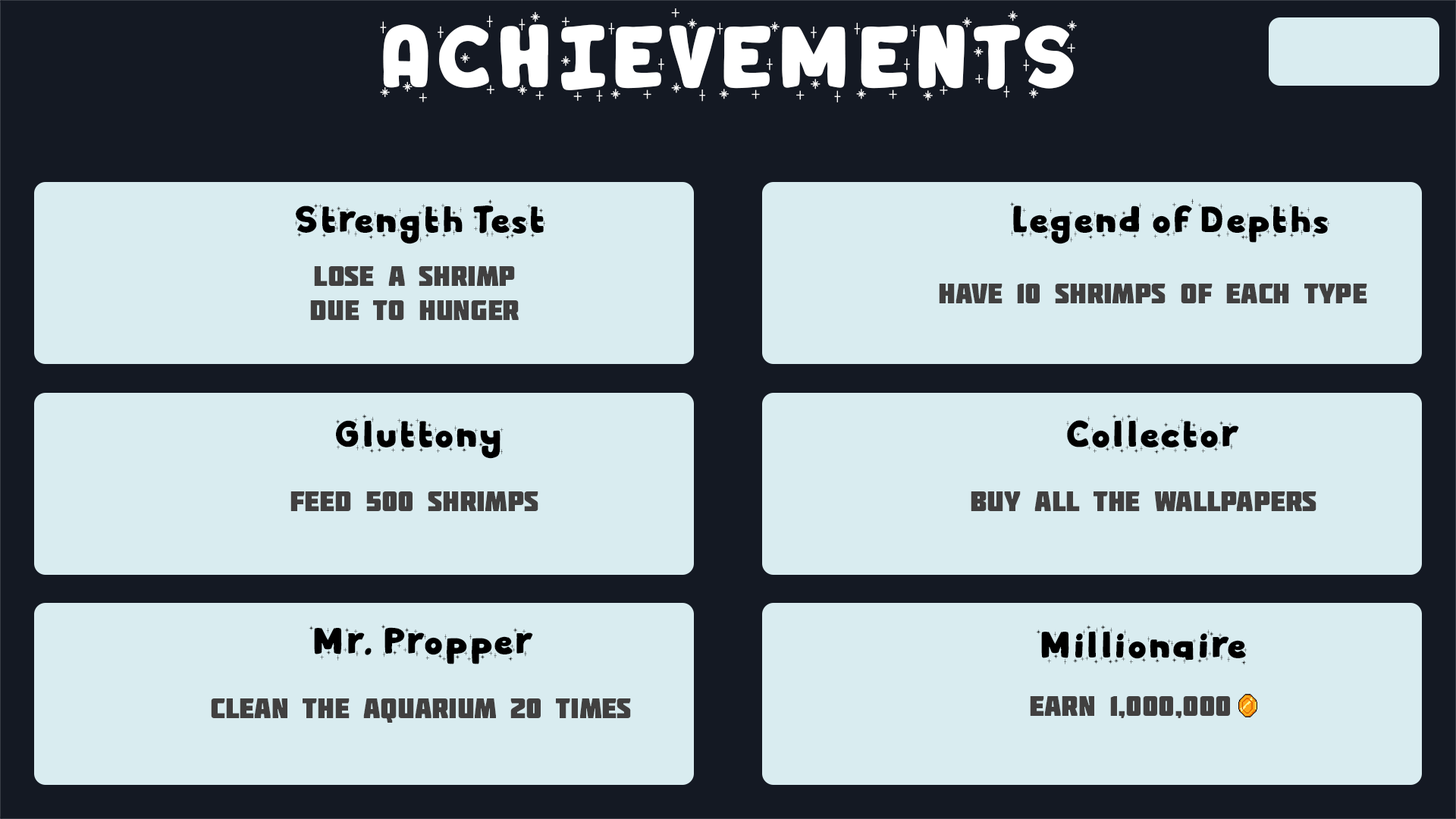
<style>
.page{position:relative;width:1456px;height:819px;background:#d9ecf0}
.page>*{position:absolute;margin:0}
.t1{font:79.6px "WinterDairy-Shiny";color:#ffffff}
.t2{font:34.1px "WinterDairy-Shiny";color:#000000}
.t3{font:28.4px "Molot";color:#414040}
</style>
<div class="page">
<p class="t1" style="left:380px;top:8px;width:697px;height:94px">ACHIEVEMENTS</p>
<p class="t2" style="left:295px;top:199px;width:251px;height:45px">Strength Test</p>
<p class="t2" style="left:1010px;top:199px;width:320px;height:45px">Legend of Depths</p>
<p class="t3" style="left:310px;top:266px;width:209px;height:54px;text-align:center">Lose a shrimp<br>due to hunger</p>
<p class="t3" style="left:939px;top:284px;width:428px;height:19px">Have 10 shrimps of each type</p>
<p class="t2" style="left:336px;top:414px;width:168px;height:45px">Gluttony</p>
<p class="t2" style="left:1066px;top:414px;width:173px;height:40px">Collector</p>
<p class="t3" style="left:290px;top:491px;width:248px;height:20px">feed 500 shrimps</p>
<p class="t3" style="left:971px;top:491px;width:345px;height:20px">Buy all the wallpapers</p>
<p class="t2" style="left:309px;top:624px;width:224px;height:40px">Mr. Propper</p>
<p class="t2" style="left:1036px;top:625px;width:211px;height:40px">Millionaire</p>
<p class="t3" style="left:211px;top:698px;width:420px;height:25px">Clean the aquarium 20 times</p>
<p class="t3" style="left:1030px;top:696px;width:200px;height:22px">Earn 1,000,000</p>
</div>
